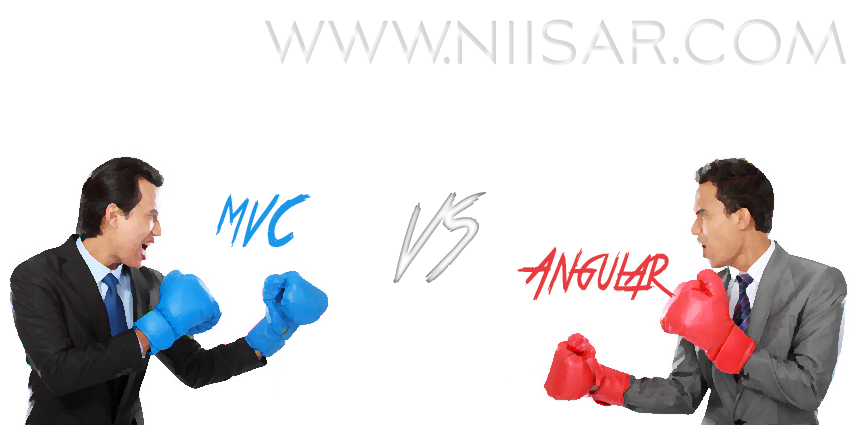
<style>
.page{position:relative;width:860px;height:425px;background:#ffffff}
.page>*{position:absolute;margin:0}
.t1{font:83.9px "AvianoSansLight";color:#dedede;font-weight:bold;scale:0.76 1}
.t2{font:51.1px "TrueLies";color:#1997e9;font-weight:bold;scale:0.76 1}
.t3{font:87px "TrueLies";font-weight:bold;scale:0.76 1}
.t4{font:51px "TrueLies";color:#e93c40;font-weight:bold;scale:0.76 1}
</style>
<div class="page">
<p class="t1" style="left:265px;top:18px;width:581px;height:48px">www.niisar.com</p>
<p class="t2" style="left:216px;top:193px;width:95px;height:55px">MVC</p>
<p class="t3" style="left:393px;top:192px;width:93px;height:92px">VS</p>
<p class="t4" style="left:517px;top:246px;width:159px;height:55px">Angular</p>
</div>
